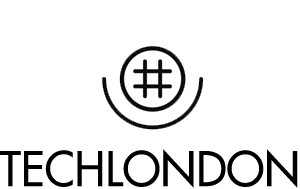
<style>
.page{position:relative;width:300px;height:189px;background:#ffffff}
.page>*{position:absolute;margin:0}
.t1{font:46.8px "FuturaLT";color:#000000}
</style>
<div class="page">
<p class="t1" style="left:0px;top:149px;width:298px;height:39px">TECHLONDON</p>
</div>
